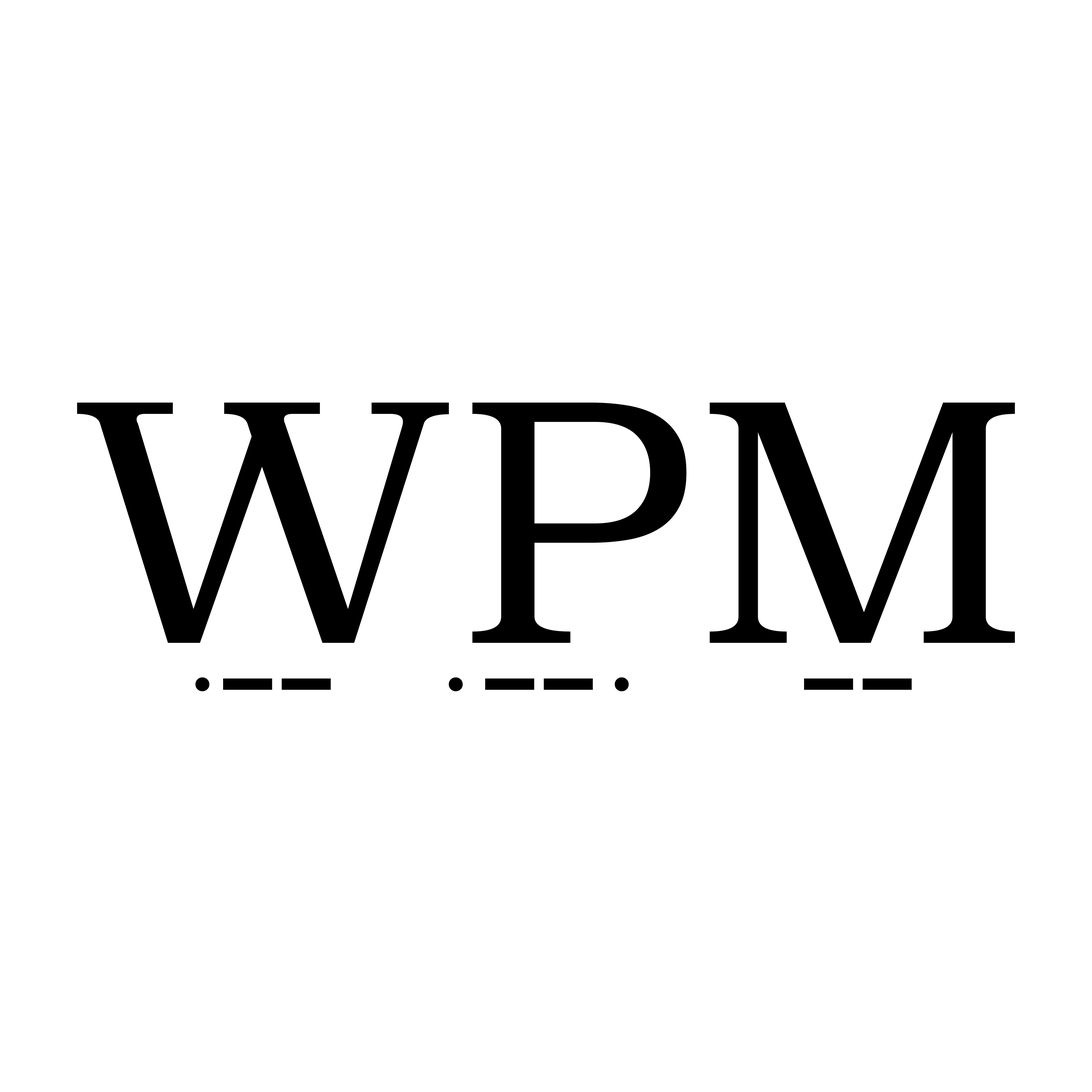
<style>
.page{position:relative;width:1092px;height:1092px;background:#ffffff}
.page>*{position:absolute;margin:0}
.t1{font:323px "Superclarendon-Light";color:#000000}
.t2{font:103.9px "Superclarendon-Light";color:#000000}
.t3{font:174.4px "Superclarendon-Light";color:#000000}
</style>
<div class="page">
<p class="t1" style="left:77px;top:403px;width:938px;height:240px">WPM</p>
<p class="t2" style="left:195px;top:677px;width:15px;height:14px">.</p>
<p class="t2" style="left:448px;top:677px;width:15px;height:14px">.</p>
<p class="t2" style="left:614px;top:677px;width:15px;height:14px">.</p>
<p class="t3" style="left:223px;top:678px;width:108px;height:12px">--</p>
<p class="t3" style="left:485px;top:678px;width:108px;height:12px">--</p>
<p class="t3" style="left:804px;top:678px;width:108px;height:12px">--</p>
</div>
